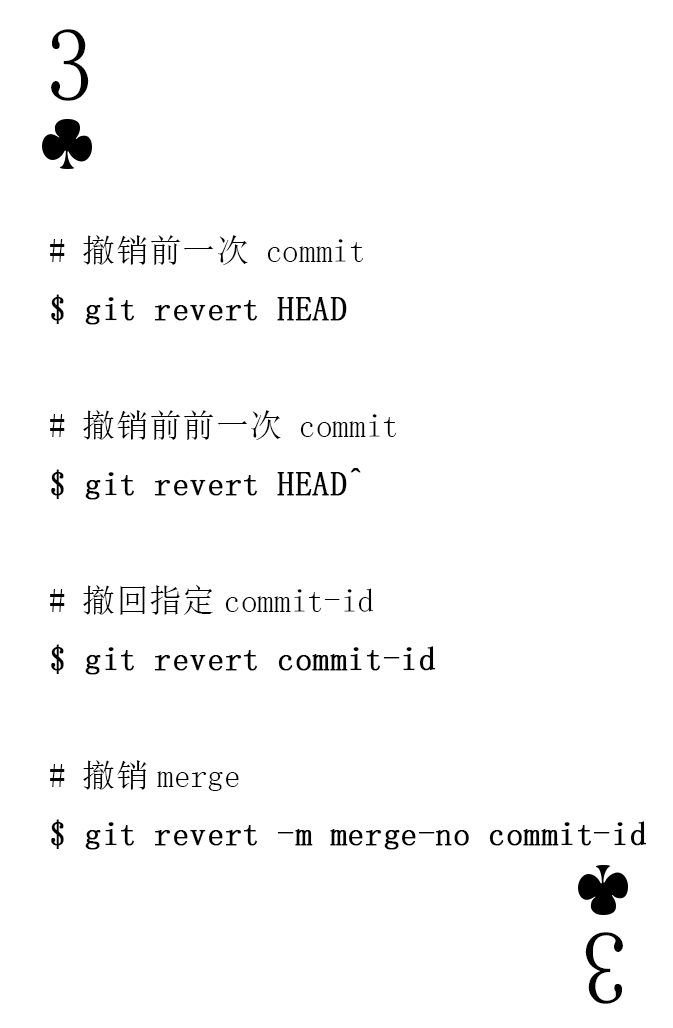
<style>
.page{position:relative;width:673px;height:1028px;background:#ffffff}
.page>*{position:absolute;margin:0}
.t1{font:104.2px "SimSun-ExtB";color:#010101;scale:0.93 1}
.t2{font:33.3px "SimSun";color:#010101;font-weight:bold}
.t3{font:33.3px "SimSun";color:#010101}
</style>
<div class="page">
<p class="t1" style="left:51px;top:29px;width:38px;height:72px">3</p>
<p class="t2" style="left:50px;top:235px;width:597px;height:615px"><span class="t3"># 撤销前一次 commit<br></span>$ git revert HEAD<br><span class="t3"><br># 撤销前前一次 commit<br></span>$ git revert HEAD^<br><span class="t3"><br># 撤回指定commit-id<br></span>$ git revert commit-id<br><span class="t3"><br># 撤销merge<br></span>$ git revert -m merge-no commit-id</p>
<p class="t1" style="left:585px;top:932px;width:38px;height:72px;rotate:180deg">3</p>
</div>
